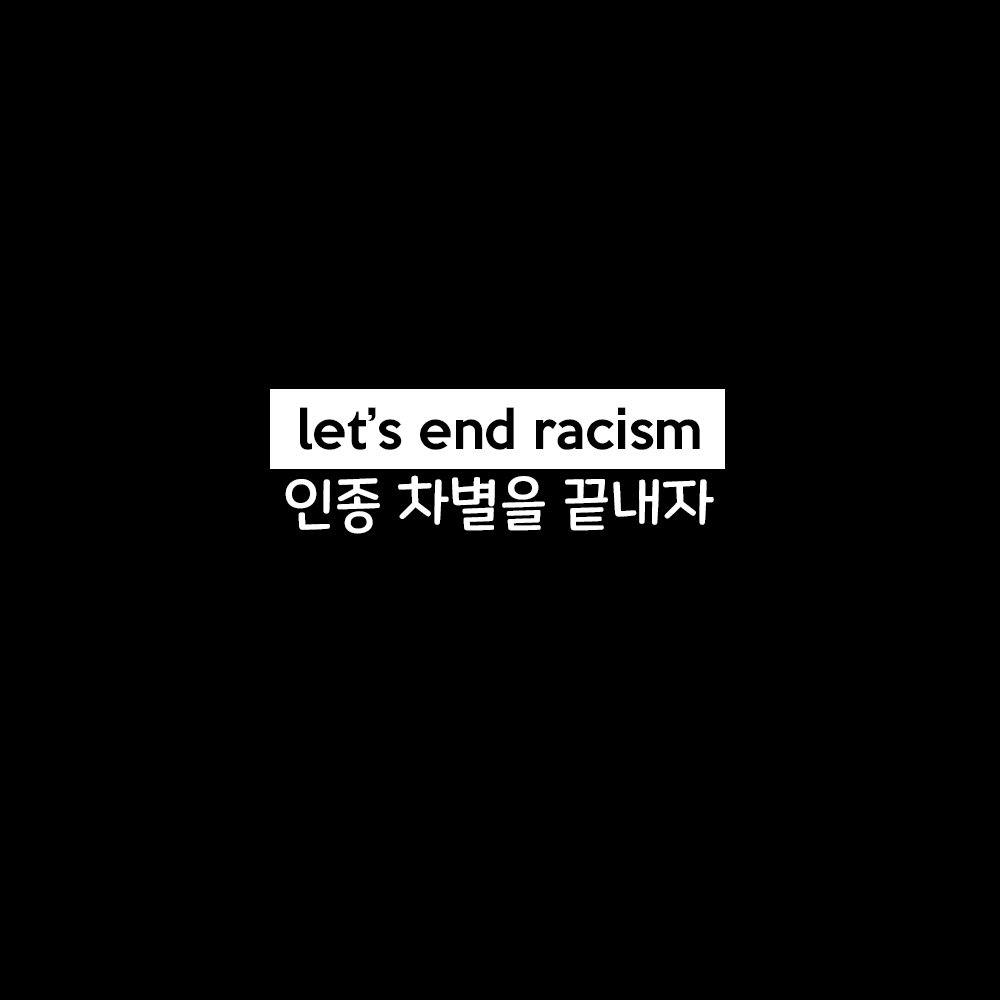
<style>
.page{position:relative;width:1000px;height:1000px;background:#000000}
.page>*{position:absolute;margin:0}
.t1{font:50px "KeepCalm-Medium";color:#000000}
.t2{font:58.3px "MaplestoryOTFLight";color:#ffffff}
</style>
<div class="page">
<p class="t1" style="left:300px;top:407px;width:400px;height:43px">let’s end racism</p>
<p class="t2" style="left:285px;top:475px;width:429px;height:59px">인종 차별을 끝내자</p>
</div>
